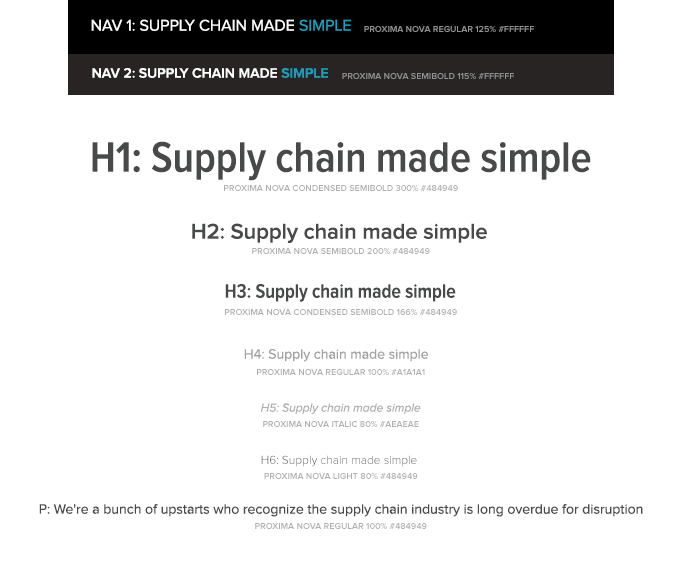
<style>
.page{position:relative;width:683px;height:568px;background:#ffffff}
.page>*{position:absolute;margin:0}
.t1{font:16px "ProximaNova-Regular";color:#ffffff}
.t2{font:16px "ProximaNova-Regular";color:#1b9ebc}
.t3{font:9px "ProximaNova-Semibold";color:#929292}
.t4{font:14px "ProximaNova-Semibold";color:#ffffff}
.t5{font:14px "ProximaNova-Semibold";color:#1b9ebc}
.t6{font:44px "ProximaNovaCond-Semibold";color:#484949}
.t7{font:9px "ProximaNova-Semibold";color:#aeaeae}
.t8{font:22px "ProximaNova-Semibold";color:#484949}
.t9{font:20px "ProximaNovaCond-Semibold";color:#484949}
.t10{font:14px "ProximaNova-Regular";color:#a1a1a1}
.t11{font:12px "ProximaNova-RegularIt";color:#aeaeae}
.t12{font:12px "ProximaNova-Light"}
.t13{font:14px "ProximaNova-Regular";color:#484949}
</style>
<div class="page">
<p class="t1" style="left:91px;top:19px;width:260px;height:12px">NAV 1: SUPPLY CHAIN MADE <span class="t2">SIMPLE</span></p>
<p class="t3" style="left:364px;top:26px;width:170px;height:6px">PROXIMA NOVA REGULAR 125% #FFFFFF</p>
<p class="t4" style="left:92px;top:68px;width:236px;height:10px">NAV 2: SUPPLY CHAIN MADE <span class="t5">SIMPLE</span></p>
<p class="t3" style="left:342px;top:73px;width:172px;height:6px">PROXIMA NOVA SEMIBOLD 115% #FFFFFF</p>
<p class="t6" style="left:92px;top:141px;width:499px;height:40px">H1: Supply chain made simple</p>
<p class="t7" style="left:224px;top:185px;width:234px;height:6px">PROXIMA NOVA CONDENSED SEMIBOLD 300% #484949</p>
<p class="t8" style="left:192px;top:223px;width:295px;height:20px">H2: Supply chain made simple</p>
<p class="t7" style="left:252px;top:248px;width:178px;height:6px">PROXIMA NOVA SEMIBOLD 200% #484949</p>
<p class="t9" style="left:225px;top:284px;width:231px;height:18px">H3: Supply chain made simple</p>
<p class="t7" style="left:225px;top:309px;width:232px;height:6px">PROXIMA NOVA CONDENSED SEMIBOLD 166% #484949</p>
<p class="t10" style="left:244px;top:349px;width:185px;height:13px">H4: Supply chain made simple</p>
<p class="t7" style="left:257px;top:369px;width:168px;height:6px">PROXIMA NOVA REGULAR 100% #A1A1A1</p>
<p class="t11" style="left:260px;top:403px;width:161px;height:11px">H5: Supply chain made simple</p>
<p class="t7" style="left:263px;top:421px;width:156px;height:6px">PROXIMA NOVA ITALIC 80% #AEAEAE</p>
<p class="t12" style="left:261px;top:455px;width:156px;height:12px">H6: Supply chain made simple</p>
<p class="t7" style="left:264px;top:473px;width:154px;height:6px">PROXIMA NOVA LIGHT 80% #484949</p>
<p class="t13" style="left:39px;top:504px;width:604px;height:13px">P: We're a bunch of upstarts who recognize the supply chain industry is long overdue for disruption</p>
<p class="t7" style="left:255px;top:523px;width:172px;height:6px">PROXIMA NOVA REGULAR 100% #484949</p>
</div>
